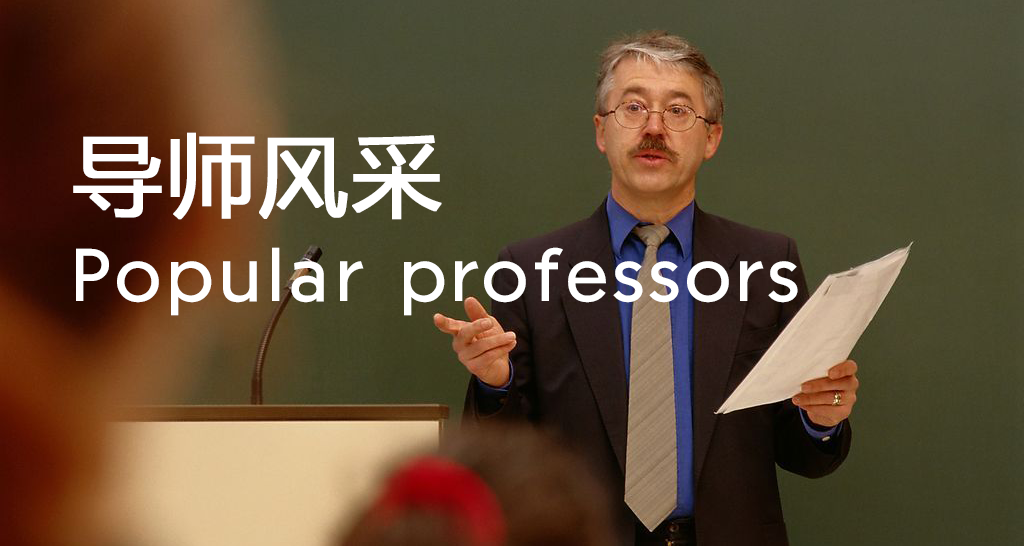
<style>
.page{position:relative;width:1024px;height:546px}
.page>*{position:absolute;margin:0}
.t1{font:88.6px "MicrosoftYaHei";letter-spacing:0.02em;color:#ffffff;font-weight:bold}
.t2{font:88.6px "FZJHJW-GB1-0";letter-spacing:0.02em;color:#ffffff}
</style>
<div class="page">
<p class="t1" style="left:73px;top:132px;width:369px;height:88px">导师风采</p>
<p class="t2" style="left:76px;top:247px;width:722px;height:69px">Popular professors</p>
</div>
